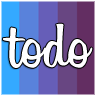
<style>
.page{position:relative;width:96px;height:96px}
.page>*{position:absolute;margin:0}
.t1{font:62.7px "Billabong";color:#ffffff;scale:1.05 1}
</style>
<div class="page">
<p class="t1" style="left:3px;top:23px;width:90px;height:45px">todo</p>
</div>
